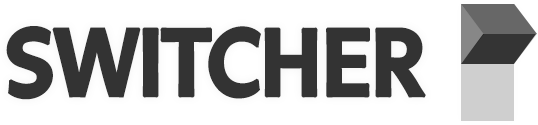
<style>
.page{position:relative;width:538px;height:125px;background:#ffffff}
.page>*{position:absolute;margin:0}
.t1{font:100px "LegatoLF-SemiBold";letter-spacing:-0.05em;color:#333333;font-weight:bold;scale:0.94 1}
</style>
<div class="page">
<p class="t1" style="left:6px;top:26px;width:420px;height:74px">SWITCHER</p>
</div>
